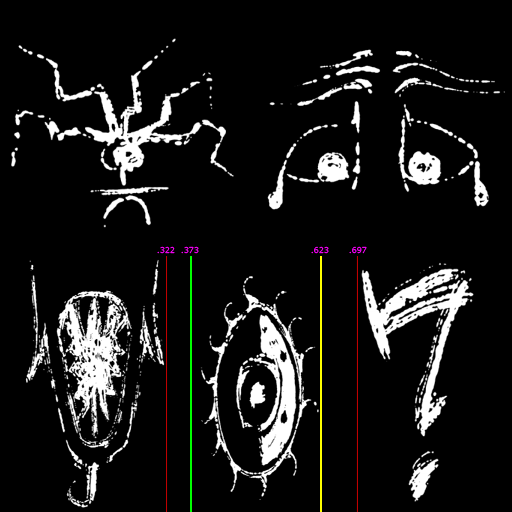
<style>
.page{position:relative;width:512px;height:512px;background:#000000}
.page>*{position:absolute;margin:0}
.t1{font:8px "Verdana";color:#ff00ff}
</style>
<div class="page">
<p class="t1" style="left:157px;top:246px;width:18px;height:8px">.322</p>
<p class="t1" style="left:181px;top:246px;width:18px;height:8px">.373</p>
<p class="t1" style="left:311px;top:246px;width:18px;height:8px">.623</p>
<p class="t1" style="left:349px;top:246px;width:18px;height:8px">.697</p>
</div>
